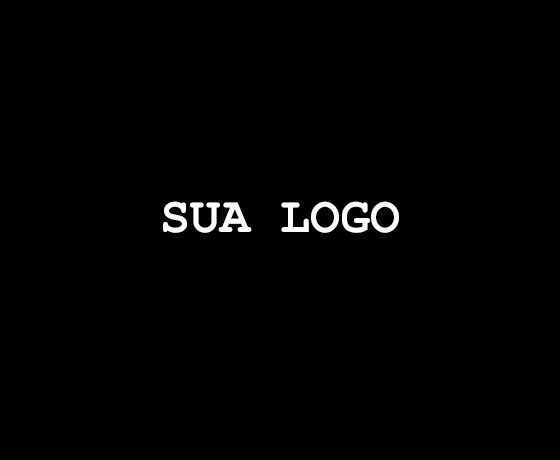
<style>
.page{position:relative;width:560px;height:460px;background:#000000}
.page>*{position:absolute;margin:0}
.t1{font:50px "CourierNewPS-BoldMT";color:#ffffff}
</style>
<div class="page">
<p class="t1" style="left:163px;top:201px;width:236px;height:32px">SUA LOGO</p>
</div>
